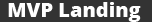
<style>
.page{position:relative;width:152px;height:22px;background:#333333}
.page>*{position:absolute;margin:0}
.t1{font:20px "OpenSans-Extrabold";color:#ffffff}
</style>
<div class="page">
<p class="t1" style="left:8px;top:2px;width:133px;height:20px">MVP Landing</p>
</div>
